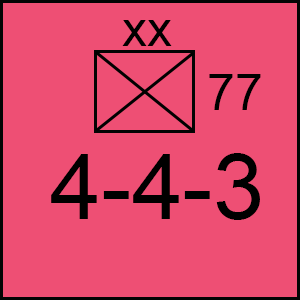
<style>
.page{position:relative;width:300px;height:300px;background:#ee4f74}
.page>*{position:absolute;margin:0}
.t1{font:50px "ArialMT";color:#000000}
.t2{font:91.7px "ArialMT";color:#000000}
</style>
<div class="page">
<p class="t1" style="left:122px;top:20px;width:50px;height:26px">xx</p>
<p class="t1" style="left:209px;top:74px;width:52px;height:36px">77</p>
<p class="t2" style="left:51px;top:153px;width:209px;height:67px">4-4-3</p>
</div>
